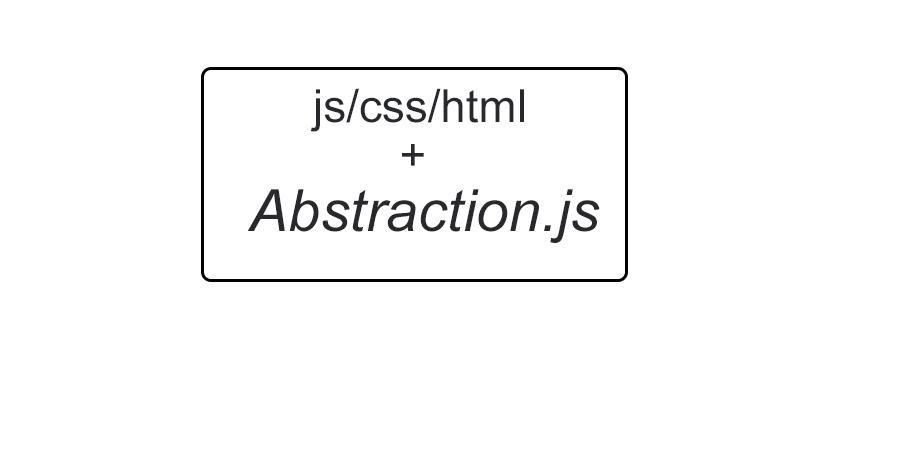
<style>
.page{position:relative;width:908px;height:450px;background:#ffffff}
.page>*{position:absolute;margin:0}
.t1{font:45.8px "ArialMT";color:#27292c}
.t2{font:58.3px "Arial-ItalicMT";color:#27292c}
</style>
<div class="page">
<p class="t1" style="left:311px;top:88px;width:213px;height:44px">js/css/html</p>
<p class="t1" style="left:402px;top:144px;width:22px;height:22px">+</p>
<p class="t2" style="left:247px;top:189px;width:353px;height:54px">Abstraction.js</p>
</div>
